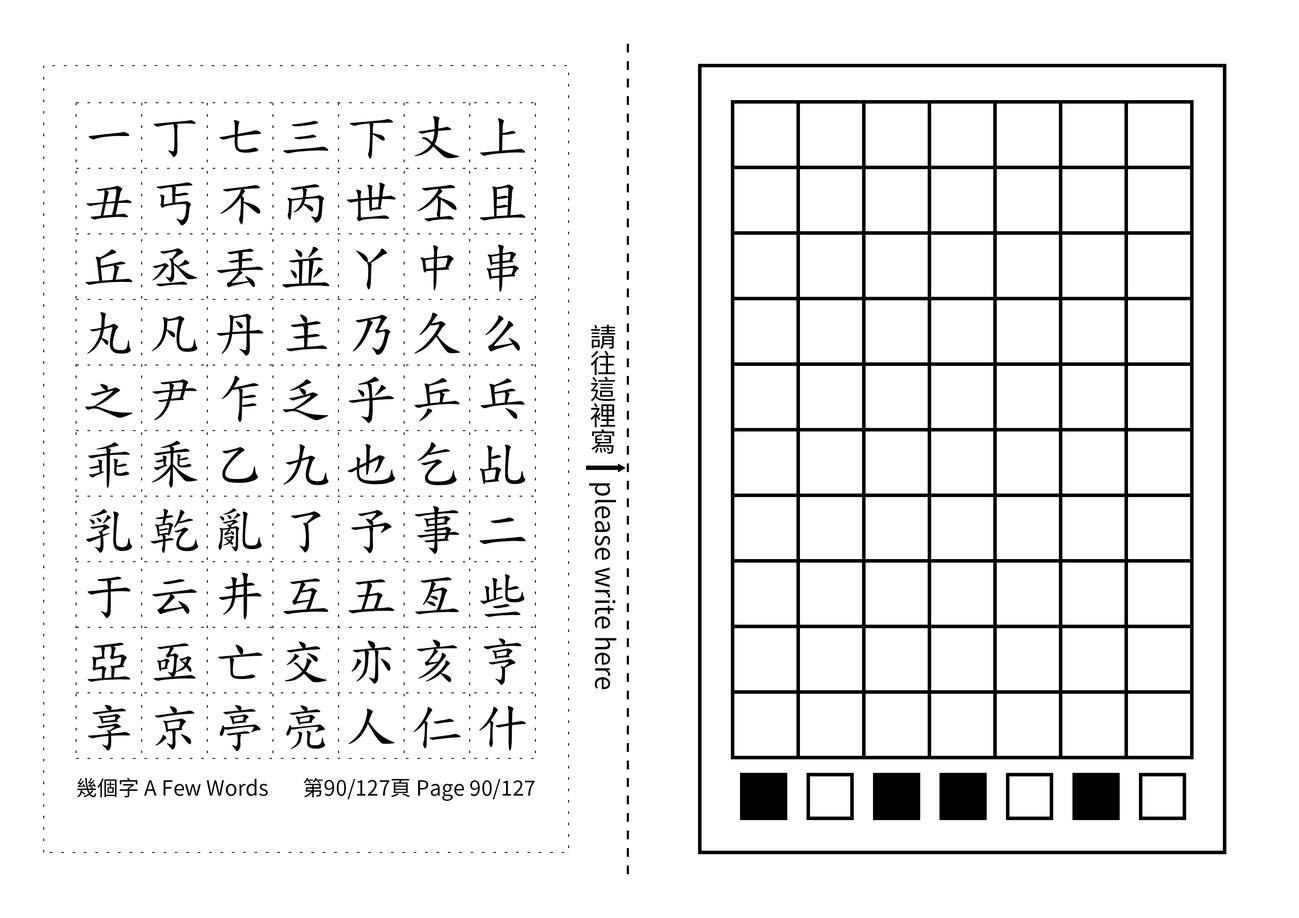
<style>
.page{position:relative;width:1299px;height:918px;background:#ffffff}
.page>*{position:absolute;margin:0}
.t1{font:52.5px/65.6px "TW-Kai-98_1";letter-spacing:0.25em;color:#000000}
.t2{font:26.2px "SourceHanSansTC-Regular";color:#000000}
.t3{font:21px "SourceHanSansTC-Regular";color:#000000}
</style>
<div class="page">
<p class="t1" style="left:85px;top:116px;width:441px;height:636px;text-align:center">一丁七三下丈上丑丐不丙世丕且丘丞丟並丫中串丸凡丹主乃久么之尹乍乏乎乒乓乖乘乙九也乞乩乳乾亂了予事二于云井互五亙些亞亟亡交亦亥亨享京亭亮人仁什</p>
<p class="t2" style="left:589px;top:324px;width:28px;height:366px;text-align:center">請往這裡寫　please write here</p>
<p class="t3" style="left:77px;top:778px;width:191px;height:20px">幾個字 A Few Words</p>
<p class="t3" style="left:303px;top:778px;width:232px;height:23px">第90/127頁 Page 90/127</p>
</div>
